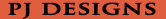
<style>
.page{position:relative;width:166px;height:19px;background:#e05d3d}
.page>*{position:absolute;margin:0}
.t1{font:18px "TrajanPro-Bold";color:#070707;font-weight:bold;scale:1.39 1}
</style>
<div class="page">
<p class="t1" style="left:8px;top:2px;width:148px;height:17px">pj designs</p>
</div>
